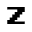
<style>
.page{position:relative;width:32px;height:32px;background:#ffffff}
.page>*{position:absolute;margin:0}
.t1{font:20px "PressStart2P-Regular";color:#000000}
</style>
<div class="page">
<p class="t1" style="left:7px;top:7px;width:18px;height:17px">Z</p>
</div>
